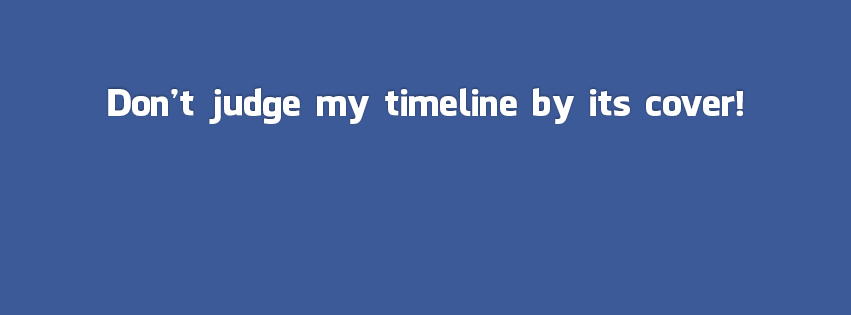
<style>
.page{position:relative;width:851px;height:315px;background:#3c5a98}
.page>*{position:absolute;margin:0}
.t1{font:36px "FacebookLetterFaces";color:#ffffff}
</style>
<div class="page">
<p class="t1" style="left:108px;top:88px;width:635px;height:36px">Don’t judge my timeline by its cover!</p>
</div>
